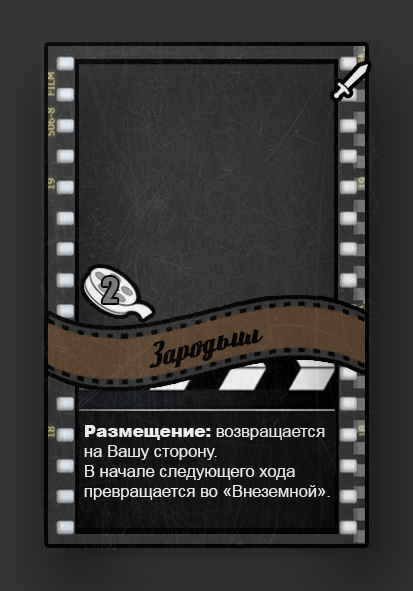
<style>
.page{position:relative;width:413px;height:591px}
.page>*{position:absolute;margin:0}
.t1{font:33.3px "Impact";color:#7e7e7e}
.t2{font:37.5px "Deftone";color:#000000}
.t3{font:16.7px "ArialMT";color:#ffffff}
.t4{font:16.7px "Arial-Black";color:#ffffff}
</style>
<div class="page">
<p class="t1" style="left:102px;top:277px;width:16px;height:26px">2</p>
<p class="t2" style="left:149px;top:329px;width:115px;height:40px">Зародыш</p>
<p class="t3" style="left:84px;top:425px;width:246px;height:75px"><span class="t4">Размещение:</span> возвращается <br>на Вашу сторону.<br>В начале следующего хода <br>превращается во «Внеземной».</p>
</div>
